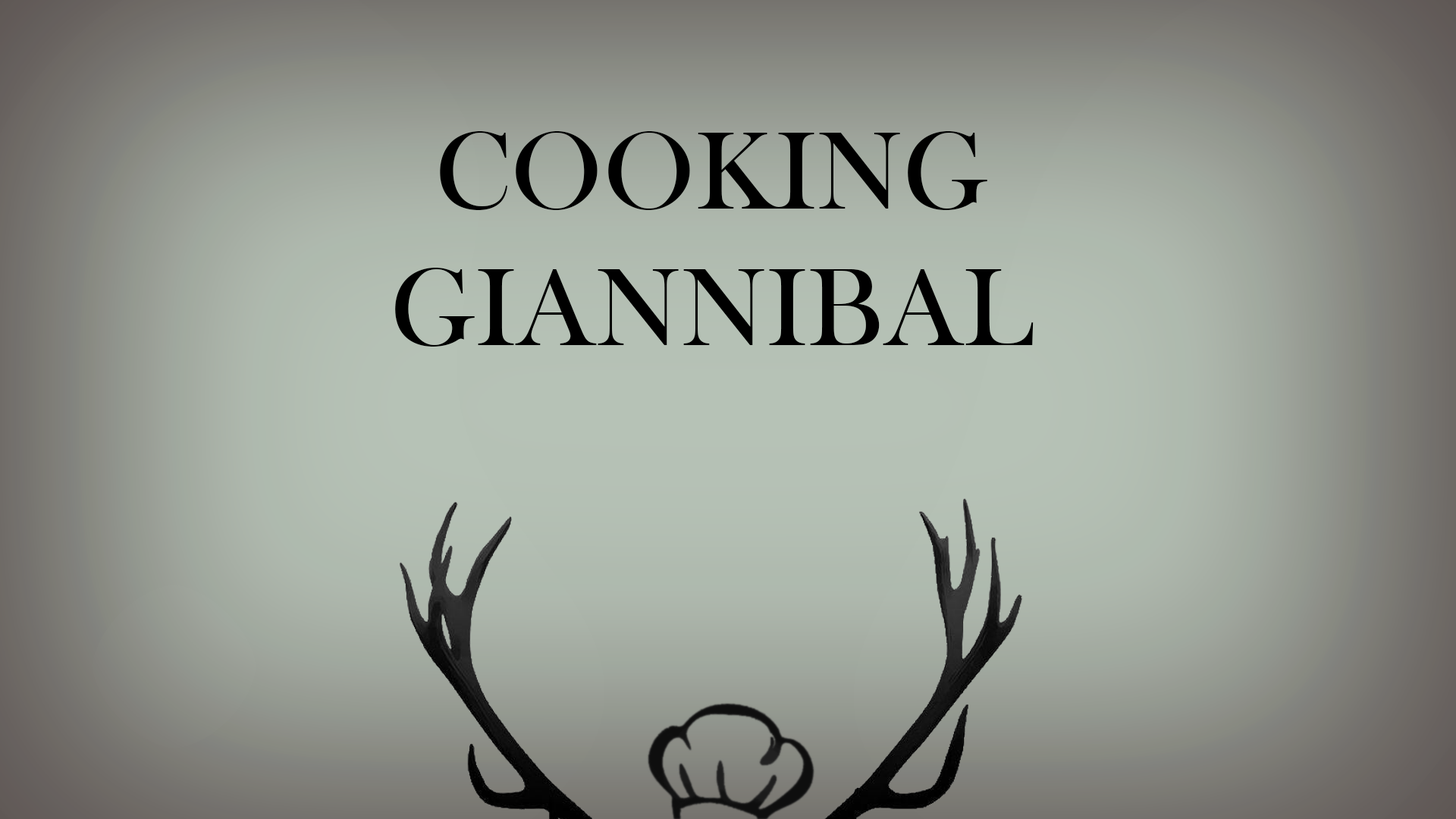
<style>
.page{position:relative;width:1456px;height:819px}
.page>*{position:absolute;margin:0}
.t1{font:113.7px "BaskOldFace";color:#000000}
</style>
<div class="page">
<p class="t1" style="left:395px;top:131px;width:639px;height:216px;text-align:center">COOKING <br>GIANNIBAL</p>
</div>
